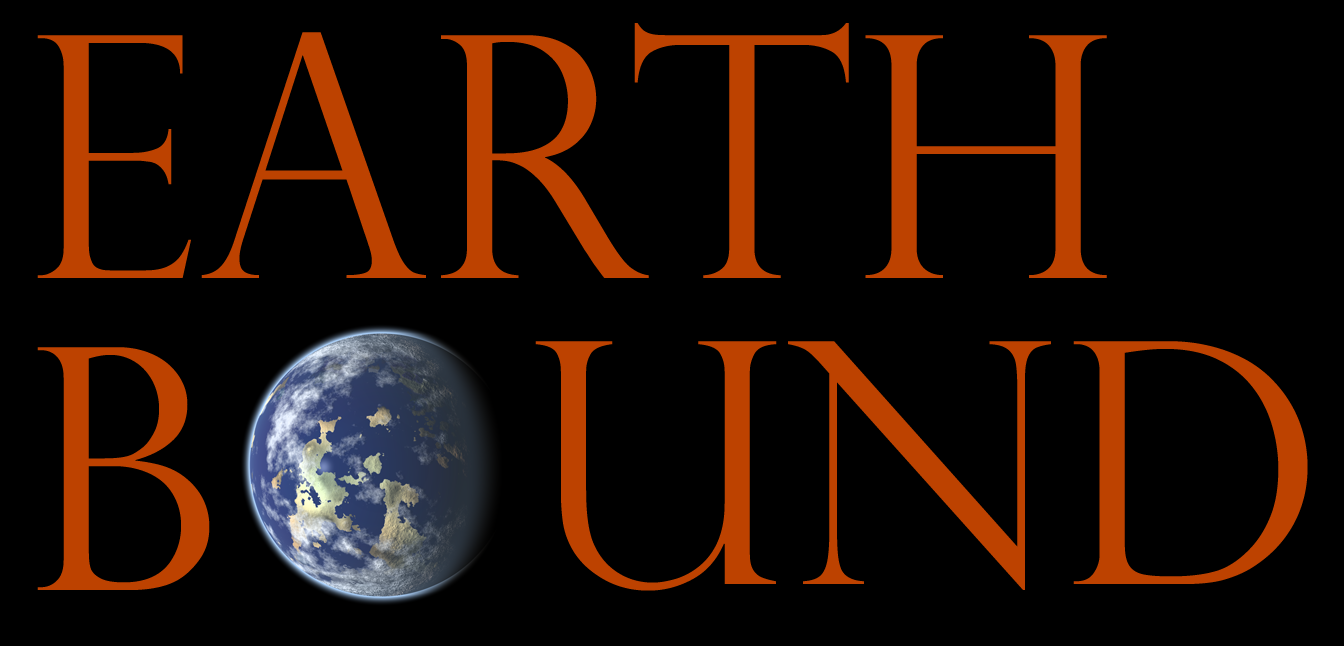
<style>
.page{position:relative;width:1344px;height:646px;background:#000000}
.page>*{position:absolute;margin:0}
.t1{font:337.5px "PerpetuaTitlingMT-Light";letter-spacing:-0.001em;color:#bd4200}
</style>
<div class="page">
<p class="t1" style="left:37px;top:23px;width:1070px;height:255px">Earth</p>
<p class="t1" style="left:535px;top:341px;width:773px;height:250px">und</p>
<p class="t1" style="left:37px;top:347px;width:173px;height:243px">B</p>
</div>
